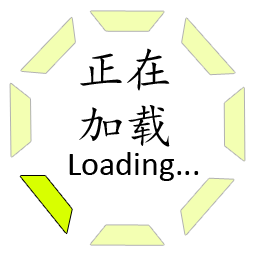
<style>
.page{position:relative;width:255px;height:255px;background:#ffffff}
.page>*{position:absolute;margin:0}
.t1{font:48px "KaiTi";color:#000000}
.t2{font:34px "Calibri";color:#000000}
</style>
<div class="page">
<p class="t1" style="left:80px;top:48px;width:90px;height:43px">正在</p>
<p class="t1" style="left:79px;top:105px;width:91px;height:42px">加载</p>
<p class="t2" style="left:69px;top:152px;width:130px;height:29px">Loading...</p>
</div>
